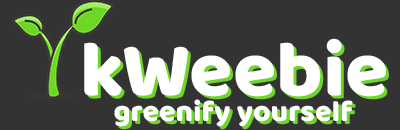
<style>
.page{position:relative;width:400px;height:130px;background:#333333}
.page>*{position:absolute;margin:0}
.t1{font:78.9px "BalooBhai-Regular";color:#ffffff}
.t2{font:30px "BalooBhai-Regular";color:#ffffff}
</style>
<div class="page">
<p class="t1" style="left:84px;top:38px;width:302px;height:59px">kWeebie</p>
<p class="t2" style="left:114px;top:99px;width:239px;height:28px">greenify yourself</p>
</div>
